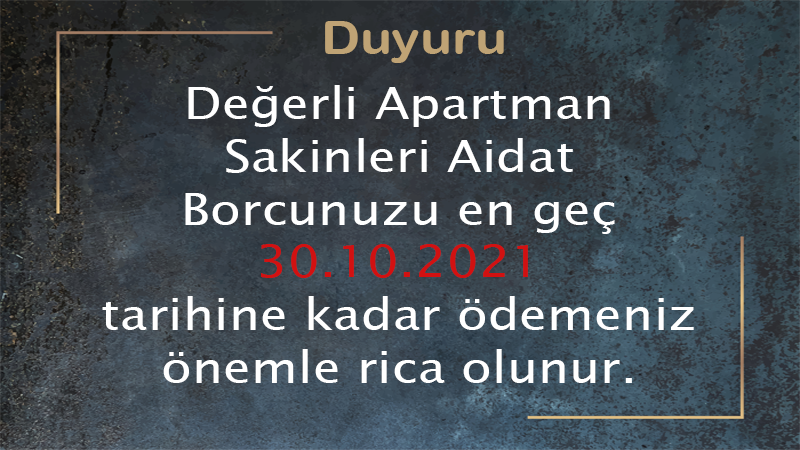
<style>
.page{position:relative;width:800px;height:450px}
.page>*{position:absolute;margin:0}
.t1{font:46px "ArialRoundedMTBold";color:#bfa375;scale:1.14 1}
.t2{font:44px "LucidaSansUnicode";color:#ffffff;scale:1.14 1}
.t3{font:44px "LucidaSansUnicode";color:#d21111;scale:1.14 1}
</style>
<div class="page">
<p class="t1" style="left:325px;top:21px;width:179px;height:42px">Duyuru</p>
<p class="t2" style="left:102px;top:85px;width:592px;height:298px;text-align:center">Değerli Apartman <br>Sakinleri Aidat <br>Borcunuzu en geç <span class="t3">30.10.2021</span> <br>tarihine kadar ödemeniz önemle rica olunur.</p>
</div>
